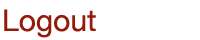
<style>
.page{position:relative;width:200px;height:40px;background:#ffffff}
.page>*{position:absolute;margin:0}
.t1{font:30px "HelveticaNeue";color:#931b0c}
</style>
<div class="page">
<p class="t1" style="left:4px;top:9px;width:92px;height:29px">Logout</p>
</div>
